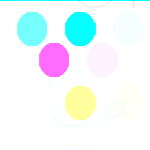
<style>
.page{position:relative;width:150px;height:150px;background:#ffffff}
.page>*{position:absolute;margin:0}
.t1{font:83.3px "Montserrat-Thin";letter-spacing:0.06em;color:#f5fff5;scale:0.88 1}
.t2{font:37.5px "OpenSans";letter-spacing:0.06em;color:#f5fff5;scale:0.88 1}
</style>
<div class="page">
<p class="t1" style="left:46px;top:68px;width:45px;height:58px">C</p>
<p class="t2" style="left:110px;top:99px;width:15px;height:27px">P</p>
</div>
